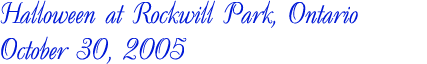
<style>
.page{position:relative;width:427px;height:64px;background:#ffffff}
.page>*{position:absolute;margin:0}
.t1{font:30px "UkrainianDecor";color:#0019d7}
</style>
<div class="page">
<p class="t1" style="left:0px;top:0px;width:358px;height:64px">Halloween at Rockwill Park, Ontario<br>October 30, 2005</p>
</div>
